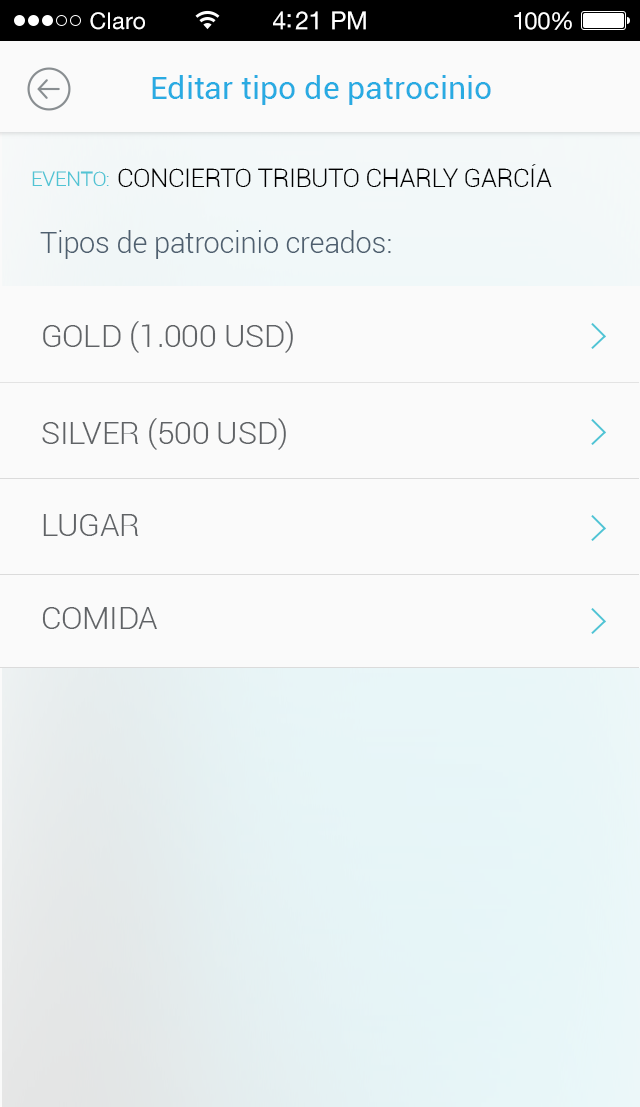
<style>
.page{position:relative;width:640px;height:1107px;background:#fafafa}
.page>*{position:absolute;margin:0}
.t1{font:23px "HelveticaNeueLTStd-Roman";letter-spacing:0.02em;color:#ffffff}
.t2{font:25px "HelveticaNeueLTStd-Roman";letter-spacing:-0.02em;color:#ffffff}
.t3{font:24px "HelveticaNeueLTStd-Roman";letter-spacing:-0.02em;color:#ffffff}
.t4{font:32px "Roboto-Regular";color:#29abe2}
.t5{font:20.4px "Roboto-Light";letter-spacing:-0.01em;color:#51c4d4}
.t6{font:25px "Roboto-Light";letter-spacing:-0.01em;color:#000000}
.t7{font:29.2px "Roboto-Light";letter-spacing:-0.01em;color:#4e5f6f}
.t8{font:32px "Roboto-Light";letter-spacing:-0.01em;color:#606366}
</style>
<div class="page">
<p class="t1" style="left:90px;top:12px;width:55px;height:18px">Claro</p>
<p class="t2" style="left:273px;top:11px;width:93px;height:19px">4:21 PM</p>
<p class="t3" style="left:514px;top:11px;width:58px;height:19px">100%</p>
<p class="t4" style="left:152px;top:75px;width:339px;height:30px">Editar tipo de patrocinio</p>
<p class="t5" style="left:32px;top:171px;width:77px;height:15px">EVENTO:</p>
<p class="t6" style="left:118px;top:164px;width:434px;height:23px">CONCIERTO TRIBUTO CHARLY GARCÍA</p>
<p class="t7" style="left:40px;top:230px;width:351px;height:29px">Tipos de patrocinio creados:</p>
<p class="t8" style="left:43px;top:321px;width:250px;height:32px">GOLD (1.000 USD)</p>
<p class="t8" style="left:42px;top:418px;width:244px;height:32px">SILVER (500 USD)</p>
<p class="t8" style="left:43px;top:514px;width:96px;height:22px">LUGAR</p>
<p class="t8" style="left:42px;top:607px;width:115px;height:22px">COMIDA</p>
</div>
